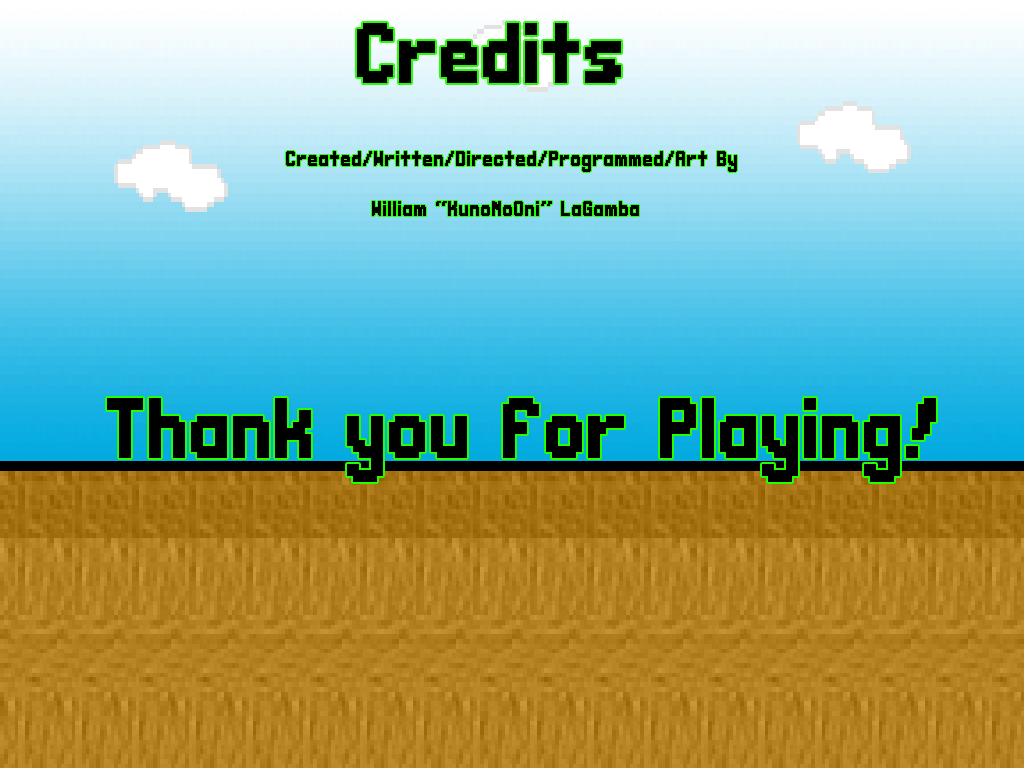
<style>
.page{position:relative;width:1024px;height:768px}
.page>*{position:absolute;margin:0}
.t1{font:48px "CasualEncounter";color:#000000}
.t2{font:12px "CasualEncounter";color:#000000}
</style>
<div class="page">
<p class="t1" style="left:357px;top:23px;width:264px;height:60px">Credits</p>
<p class="t2" style="left:286px;top:151px;width:451px;height:21px">Created/Written/Directed/Programmed/Art By</p>
<p class="t2" style="left:372px;top:201px;width:267px;height:15px">William “KunoNoOni” LaGamba</p>
<p class="t1" style="left:107px;top:398px;width:829px;height:84px">Thank you for Playing!</p>
</div>
